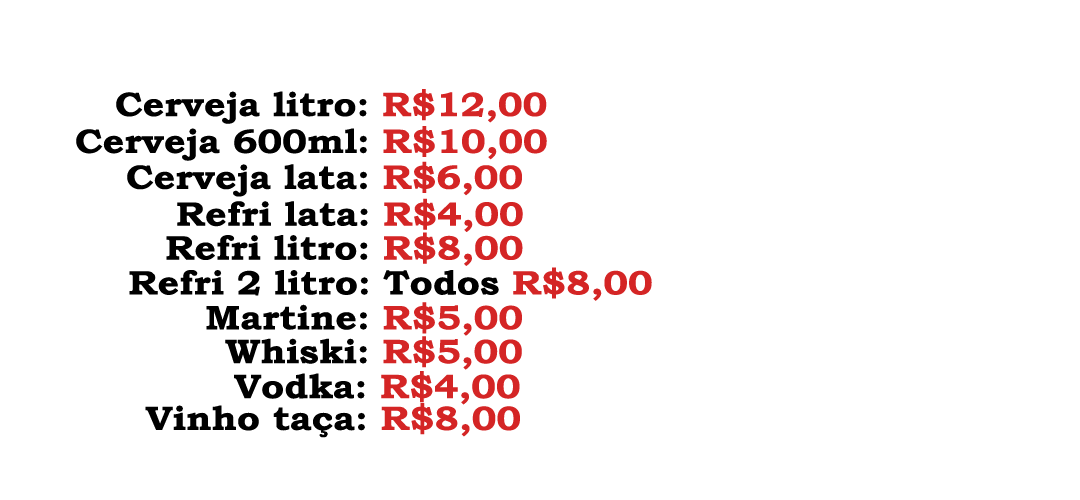
<style>
.page{position:relative;width:1080px;height:500px;background:#ffffff}
.page>*{position:absolute;margin:0}
.t1{font:34.1px "BookmanOldStyle-Bold";color:#000000;scale:1.1 1}
.t2{font:34.1px "BookmanOldStyle-Bold";color:#d42525;scale:1.1 1}
</style>
<div class="page">
<p class="t1" style="left:116px;top:89px;width:431px;height:35px">Cerveja litro: <span class="t2">R$12,00</span></p>
<p class="t1" style="left:76px;top:126px;width:471px;height:35px">Cerveja 600ml: <span class="t2">R$10,00</span></p>
<p class="t1" style="left:127px;top:161px;width:395px;height:36px">Cerveja lata: <span class="t2">R$6,00</span></p>
<p class="t1" style="left:177px;top:198px;width:346px;height:34px">Refri lata: <span class="t2">R$4,00</span></p>
<p class="t1" style="left:166px;top:232px;width:357px;height:34px">Refri litro: <span class="t2">R$8,00</span></p>
<p class="t1" style="left:129px;top:267px;width:523px;height:34px">Refri 2 litro: Todos <span class="t2">R$8,00</span></p>
<p class="t1" style="left:206px;top:302px;width:316px;height:34px">Martine: <span class="t2">R$5,00</span></p>
<p class="t1" style="left:225px;top:336px;width:297px;height:34px">Whiski: <span class="t2">R$5,00</span></p>
<p class="t1" style="left:234px;top:371px;width:286px;height:34px">Vodka: <span class="t2">R$4,00</span></p>
<p class="t1" style="left:145px;top:403px;width:375px;height:35px">Vinho taça: <span class="t2">R$8,00</span></p>
</div>
